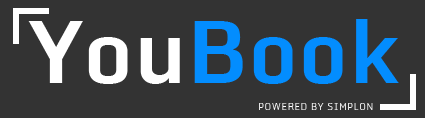
<style>
.page{position:relative;width:425px;height:118px;background:#333333}
.page>*{position:absolute;margin:0}
.t1{font:85px "Monda-Bold";color:#038dfe}
.t2{font:85px "Monda-Bold";color:#ffffff}
.t3{font:9px "Monda-Light";letter-spacing:0.075em;color:#ffffff}
</style>
<div class="page">
<p class="t1" style="left:28px;top:19px;width:371px;height:65px"><span class="t2">You</span>Book</p>
<p class="t3" style="left:259px;top:103px;width:114px;height:7px">POWERED BY SIMPLON</p>
</div>
